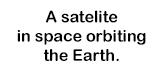
<style>
.page{position:relative;width:160px;height:75px;background:#ffffff}
.page>*{position:absolute;margin:0}
.t1{font:16px "ArialRoundedMTBold";color:#000000}
</style>
<div class="page">
<p class="t1" style="left:17px;top:10px;width:129px;height:51px;text-align:center">A satelite<br>in space orbiting<br>the Earth.</p>
</div>
